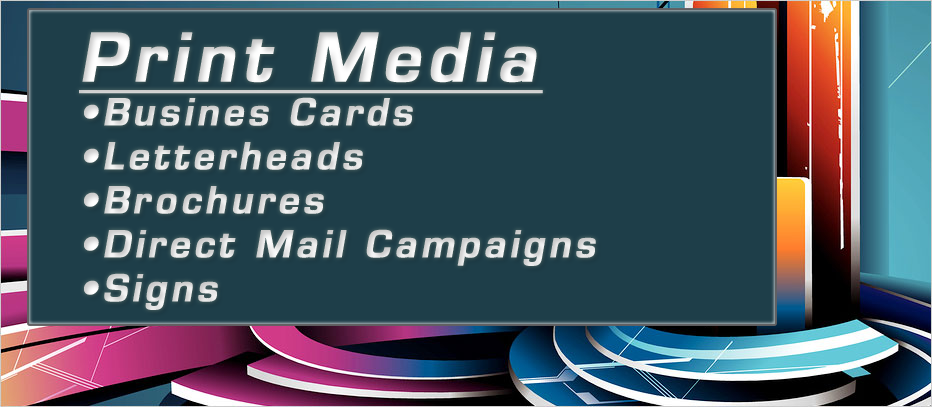
<style>
.page{position:relative;width:932px;height:407px;background:#1e3e49}
.page>*{position:absolute;margin:0}
.t1{font:36px/44px "Square721DmNormal";letter-spacing:0.095em;color:#e1e1e1;font-weight:bold;font-style:italic}
.t2{font:65px/44px "Square721DmNormal";letter-spacing:0.095em;color:#e1e1e1;font-weight:bold;font-style:italic;text-decoration:underline}
</style>
<div class="page">
<p class="t1" style="left:79px;top:32px;width:517px;height:278px"><span class="t2">Print Media<br></span>•Busines Cards<br>•Letterheads<br>•Brochures<br>•Direct Mail Campaigns<br>•Signs</p>
</div>
